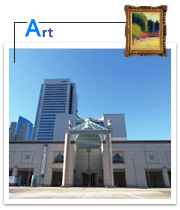
<style>
.page{position:relative;width:180px;height:210px;background:#ffffff}
.page>*{position:absolute;margin:0}
.t1{font:17px "EstrangeloEdessa";color:#364996}
.t2{font:27px "EstrangeloEdessa";color:#0080fe}
</style>
<div class="page">
<p class="t1" style="left:25px;top:19px;width:28px;height:19px"><span class="t2">A</span>rt</p>
</div>
